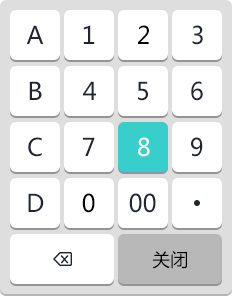
<style>
.page{position:relative;width:232px;height:296px;background:#ffffff}
.page>*{position:absolute;margin:0}
.t1{font:24px "MicrosoftYaHei";color:#212530}
.t2{font:24px "MicrosoftYaHei";color:#000000}
.t3{font:24px "MicrosoftYaHei";color:#ffffff}
.t4{font:18px "MicrosoftYaHei";color:#000000}
</style>
<div class="page">
<p class="t1" style="left:26px;top:25px;width:18px;height:19px">A</p>
<p class="t1" style="left:83px;top:25px;width:12px;height:19px">1</p>
<p class="t2" style="left:138px;top:25px;width:11px;height:19px">2</p>
<p class="t1" style="left:192px;top:25px;width:11px;height:20px">3</p>
<p class="t1" style="left:29px;top:81px;width:13px;height:19px">B</p>
<p class="t1" style="left:83px;top:81px;width:13px;height:19px">4</p>
<p class="t1" style="left:138px;top:81px;width:10px;height:20px">5</p>
<p class="t1" style="left:191px;top:81px;width:12px;height:20px">6</p>
<p class="t1" style="left:28px;top:137px;width:14px;height:20px">C</p>
<p class="t1" style="left:83px;top:137px;width:12px;height:19px">7</p>
<p class="t3" style="left:138px;top:137px;width:12px;height:20px">8</p>
<p class="t1" style="left:191px;top:137px;width:12px;height:20px">9</p>
<p class="t1" style="left:28px;top:193px;width:16px;height:19px">D</p>
<p class="t2" style="left:82px;top:193px;width:13px;height:20px">0</p>
<p class="t1" style="left:129px;top:193px;width:27px;height:20px">00</p>
<p class="t4" style="left:152px;top:251px;width:35px;height:18px">关闭</p>
</div>
